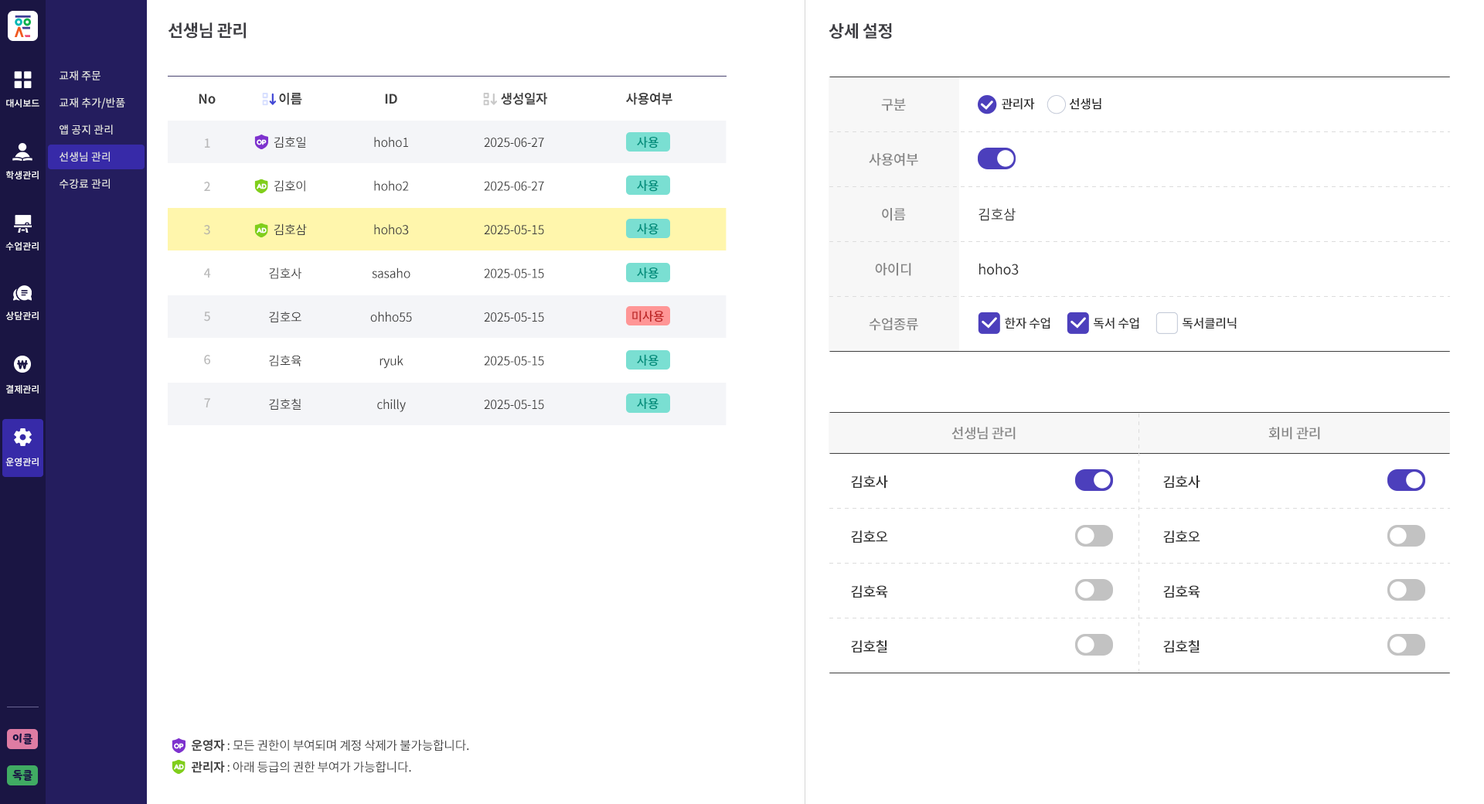
<style>
.page{position:relative;width:1484px;height:804px;background:#ffffff}
.page>*{position:absolute;margin:0}
.t1{font:17px "NotoSansCJKkr-Bold";letter-spacing:-0.025em;color:#3e3e43;text-transform:uppercase}
.t2{font:10.8px/27px "NotoSansCJKkr-Medium";color:#e1e1e1}
.t3{font:9.3px "NotoSansCJKkr-Medium";color:#ffffff}
.t4{font:13.1px "NotoSansCJKkr-Bold";letter-spacing:-0.025em;color:#404040}
.t5{font:13.9px/54.9px "NotoSansCJKkr-Medium";letter-spacing:-0.025em;color:#878787}
.t6{font:12.4px "NotoSansCJKkr-Medium";letter-spacing:-0.025em;color:#272727}
.t7{font:12.4px/43.7px "NotoSansCJKkr-Regular";letter-spacing:-0.025em;color:#404040}
.t8{font:12.4px "NotoSansCJKkr-Medium";letter-spacing:-0.025em;color:#008d7b}
.t9{font:12.4px/43.3px "NotoSansCJKkr-Medium";letter-spacing:-0.025em;color:#a8a8a8}
.t10{font:7px "FredokaOne-Regular";letter-spacing:-0.025em;color:#ffffff}
.t11{font:13.9px/54.9px "NotoSansCJKkr-Regular";letter-spacing:-0.01em;color:#2f2f2f}
.t12{font:12.4px "NotoSansCJKkr-Medium";letter-spacing:-0.025em;color:#be2727}
.t13{font:12.4px "NotoSansCJKkr-Medium";letter-spacing:-0.025em;color:#323232}
.t14{font:13.9px "NotoSansCJKkr-Medium";letter-spacing:-0.025em;color:#878787}
.t15{font:13.9px/54.9px "NotoSansCJKkr-Medium";letter-spacing:-0.025em;color:#323232}
.t16{font:10.8px "YoonSoftSlime";color:#1a1543}
.t17{font:12.4px/21.6px "NotoSansCJKkr-Regular";letter-spacing:-0.025em;color:#404040}
.t18{font:12.4px/21.6px "NotoSansCJKkr-Bold";letter-spacing:-0.025em;color:#404040}
</style>
<div class="page">
<p class="t1" style="left:168px;top:22px;width:78px;height:17px">선생님 관리</p>
<p class="t1" style="left:828px;top:23px;width:64px;height:16px">상세 설정</p>
<p class="t2" style="left:60px;top:70px;width:65px;height:119px">교재 주문<br>교재 추가/반품<br>앱 공지 관리<br>선생님 관리<br>수강료 관리</p>
<p class="t3" style="left:6px;top:99px;width:33px;height:8px">대시보드</p>
<p class="t4" style="left:199px;top:94px;width:17px;height:10px">No</p>
<p class="t4" style="left:279px;top:93px;width:23px;height:12px">이름</p>
<p class="t4" style="left:385px;top:94px;width:12px;height:10px">ID</p>
<p class="t4" style="left:501px;top:92px;width:46px;height:13px">생성일자</p>
<p class="t4" style="left:626px;top:92px;width:46px;height:13px">사용여부</p>
<p class="t5" style="left:869px;top:98px;width:49px;height:233px;text-align:center">구분<br>사용여부<br>이름<br>아이디<br>수업종류</p>
<p class="t5" style="left:869px;top:98px;width:49px;height:233px;text-align:center">구분<br>사용여부<br>이름<br>아이디<br>수업종류</p>
<p class="t6" style="left:1002px;top:98px;width:33px;height:12px">관리자</p>
<p class="t6" style="left:1069px;top:98px;width:32px;height:12px">선생님</p>
<p class="t7" style="left:269px;top:136px;width:38px;height:274px">김호일<br>  김호이<br>  김호삼<br>김호사<br>김호오<br>김호육<br>김호칠</p>
<p class="t7" style="left:370px;top:137px;width:42px;height:275px;text-align:center">hoho1<br>hoho2<br>hoho3<br>sasaho<br>ohho55<br>ryuk<br>chilly</p>
<p class="t7" style="left:484px;top:138px;width:60px;height:272px;text-align:center">2025-06-27<br>2025-06-27<br>2025-05-15<br>2025-05-15<br>2025-05-15<br>2025-05-15<br>2025-05-15</p>
<p class="t8" style="left:637px;top:136px;width:21px;height:12px">사용</p>
<p class="t9" style="left:203px;top:138px;width:8px;height:269px;text-align:center;opacity:0.8">1<br>2<br>3<br>4<br>5<br>6<br>7</p>
<p class="t10" style="left:257px;top:139px;width:10px;height:6px">OP</p>
<p class="t3" style="left:6px;top:171px;width:33px;height:8px">학생관리</p>
<p class="t10" style="left:257px;top:183px;width:10px;height:6px">AD</p>
<p class="t8" style="left:637px;top:179px;width:21px;height:13px">사용</p>
<p class="t11" style="left:978px;top:208px;width:41px;height:67px">김호삼<br>hoho3</p>
<p class="t10" style="left:257px;top:227px;width:10px;height:6px">AD</p>
<p class="t8" style="left:637px;top:223px;width:21px;height:12px">사용</p>
<p class="t3" style="left:5px;top:242px;width:34px;height:8px">수업관리</p>
<p class="t8" style="left:637px;top:267px;width:21px;height:12px">사용</p>
<p class="t3" style="left:5px;top:311px;width:34px;height:9px">상담관리</p>
<p class="t12" style="left:632px;top:310px;width:32px;height:12px">미사용</p>
<p class="t13" style="left:1005px;top:317px;width:45px;height:12px">한자 수업</p>
<p class="t13" style="left:1093px;top:317px;width:46px;height:12px">독서 수업</p>
<p class="t13" style="left:1182px;top:317px;width:54px;height:12px">독서클리닉</p>
<p class="t8" style="left:637px;top:354px;width:21px;height:12px">사용</p>
<p class="t3" style="left:6px;top:385px;width:33px;height:8px">결제관리</p>
<p class="t8" style="left:637px;top:397px;width:21px;height:13px">사용</p>
<p class="t14" style="left:951px;top:427px;width:64px;height:13px">선생님 관리</p>
<p class="t14" style="left:1268px;top:427px;width:52px;height:13px">회비 관리</p>
<p class="t3" style="left:5px;top:457px;width:34px;height:9px">운영관리</p>
<p class="t15" style="left:851px;top:475px;width:37px;height:178px">김호사<br>김호오<br>김호육<br>김호칠</p>
<p class="t15" style="left:1163px;top:475px;width:37px;height:178px">김호사<br>김호오<br>김호육<br>김호칠</p>
<p class="t16" style="left:12px;top:733px;width:20px;height:11px">이클</p>
<p class="t10" style="left:174px;top:743px;width:10px;height:6px">OP</p>
<p class="t17" style="left:191px;top:739px;width:278px;height:34px"><span class="t18">운영자</span> : 모든 권한이 부여되며 계정 삭제가 불가능합니다.   <br><span class="t18">관리자</span> : 아래 등급의 권한 부여가 가능합니다.</p>
<p class="t16" style="left:12px;top:770px;width:20px;height:10px">독클</p>
<p class="t10" style="left:174px;top:763px;width:10px;height:7px">AD</p>
</div>
